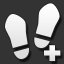
<style>
.page{position:relative;width:64px;height:64px;background:#333333}
.page>*{position:absolute;margin:0}
.t1{font:32px "RussoOne";color:#ffffff;font-weight:bold}
</style>
<div class="page">
<p class="t1" style="left:44px;top:45px;width:17px;height:16px">+</p>
</div>
